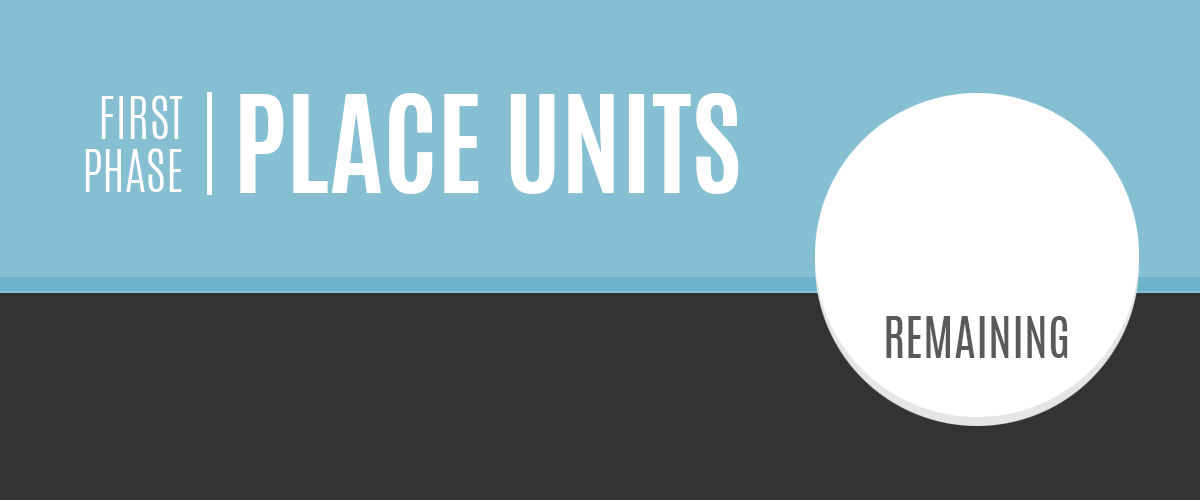
<style>
.page{position:relative;width:1200px;height:500px;background:#86bfd2}
.page>*{position:absolute;margin:0}
.t1{font:50px/53px "Antonio-Light";color:#ffffff}
.t2{font:115px "Antonio-Bold";color:#ffffff}
.t3{font:48px "Antonio-Regular";color:#5a5a5a}
</style>
<div class="page">
<p class="t1" style="left:85px;top:95px;width:98px;height:97px;text-align:right">FIRST<br>PHASE</p>
<p class="t2" style="left:240px;top:93px;width:499px;height:101px">PLACE UNITS</p>
<p class="t3" style="left:886px;top:316px;width:182px;height:42px">REMAINING</p>
</div>
